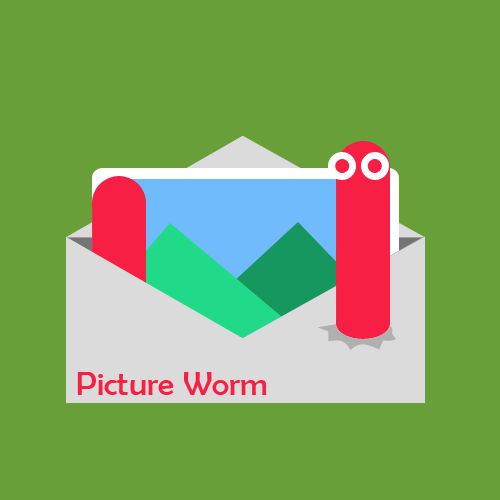
<style>
.page{position:relative;width:500px;height:500px;background:#689f38}
.page>*{position:absolute;margin:0}
.t1{font:33.3px "BerlinSansFB-Reg";color:#f71f43}
</style>
<div class="page">
<p class="t1" style="left:77px;top:372px;width:190px;height:23px">Picture Worm</p>
</div>
